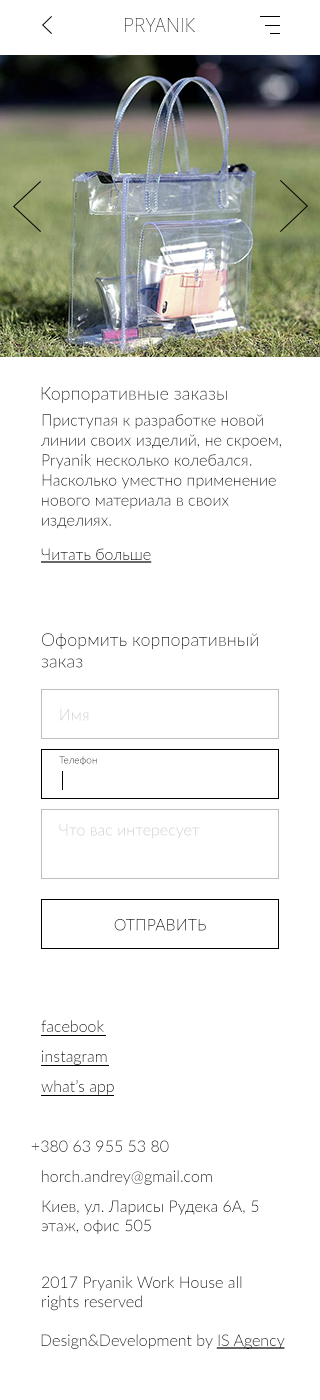
<style>
.page{position:relative;width:320px;height:1400px;background:#ffffff}
.page>*{position:absolute;margin:0}
.t1{font:18px "Lato-Light"}
.t2{font:16px/20px "Lato-Light";color:#000000}
.t3{font:16px "Lato-Light";text-decoration:underline}
.t4{font:16px "Lato-Light"}
.t5{font:10px "Lato-Light"}
.t6{font:16px "Lato-Light";color:#000000;text-transform:uppercase}
.t7{font:16px "Lato-Light";color:#000000}
.t8{font:16px "Lato-Light";color:#000000;text-decoration:underline}
</style>
<div class="page">
<p class="t1" style="left:41px;top:387px;width:186px;height:16px">Корпоративные заказы</p>
<p class="t2" style="left:41px;top:414px;width:240px;height:115px">Приступая к разработке новой линии своих изделий, не скроем, Pryanik несколько колебался. Насколько уместно применение нового материала в своих изделиях.</p>
<p class="t3" style="left:41px;top:548px;width:111px;height:15px">Читать больше</p>
<p class="t1" style="left:41px;top:633px;width:217px;height:35px">Оформить корпоративный <br>заказ</p>
<p class="t4" style="left:60px;top:709px;width:29px;height:12px">Имя</p>
<p class="t5" style="left:59px;top:756px;width:38px;height:10px">Телефон</p>
<p class="t4" style="left:59px;top:824px;width:141px;height:15px">Что вас интересует</p>
<p class="t6" style="left:114px;top:919px;width:92px;height:12px">Отправить</p>
<p class="t4" style="left:41px;top:1020px;width:63px;height:12px">facebook</p>
<p class="t4" style="left:42px;top:1050px;width:65px;height:15px">instagram</p>
<p class="t4" style="left:41px;top:1080px;width:73px;height:15px">what’s app</p>
<p class="t4" style="left:31px;top:1140px;width:138px;height:12px">+380 63 955 53 80</p>
<p class="t4" style="left:42px;top:1170px;width:170px;height:15px">horch.andrey@gmail.com</p>
<p class="t7" style="left:41px;top:1200px;width:218px;height:34px">Киев, ул. Ларисы Рудека 6А, 5 этаж, офис 505</p>
<p class="t7" style="left:42px;top:1276px;width:200px;height:35px">2017 Pryanik Work House all rights reserved</p>
<p class="t7" style="left:41px;top:1334px;width:244px;height:15px">Design&amp;Development by <span class="t8">IS Agency</span></p>
</div>
